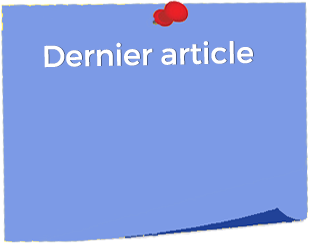
<style>
.page{position:relative;width:309px;height:243px;background:#7c9ae6}
.page>*{position:absolute;margin:0}
.t1{font:30px "Montserrat-Regular";color:#ffffff}
</style>
<div class="page">
<p class="t1" style="left:44px;top:41px;width:209px;height:27px;rotate:-1deg">Dernier article</p>
</div>
